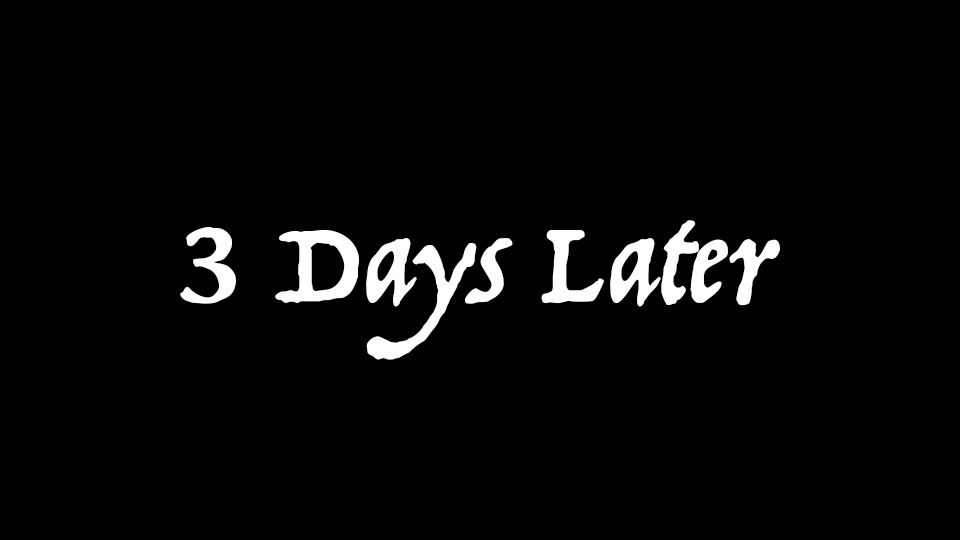
<style>
.page{position:relative;width:960px;height:540px;background:#000000}
.page>*{position:absolute;margin:0}
.t1{font:129.3px "Trattatello";color:#ffffff}
</style>
<div class="page">
<p class="t1" style="left:180px;top:220px;width:600px;height:140px">3 Days Later</p>
</div>
